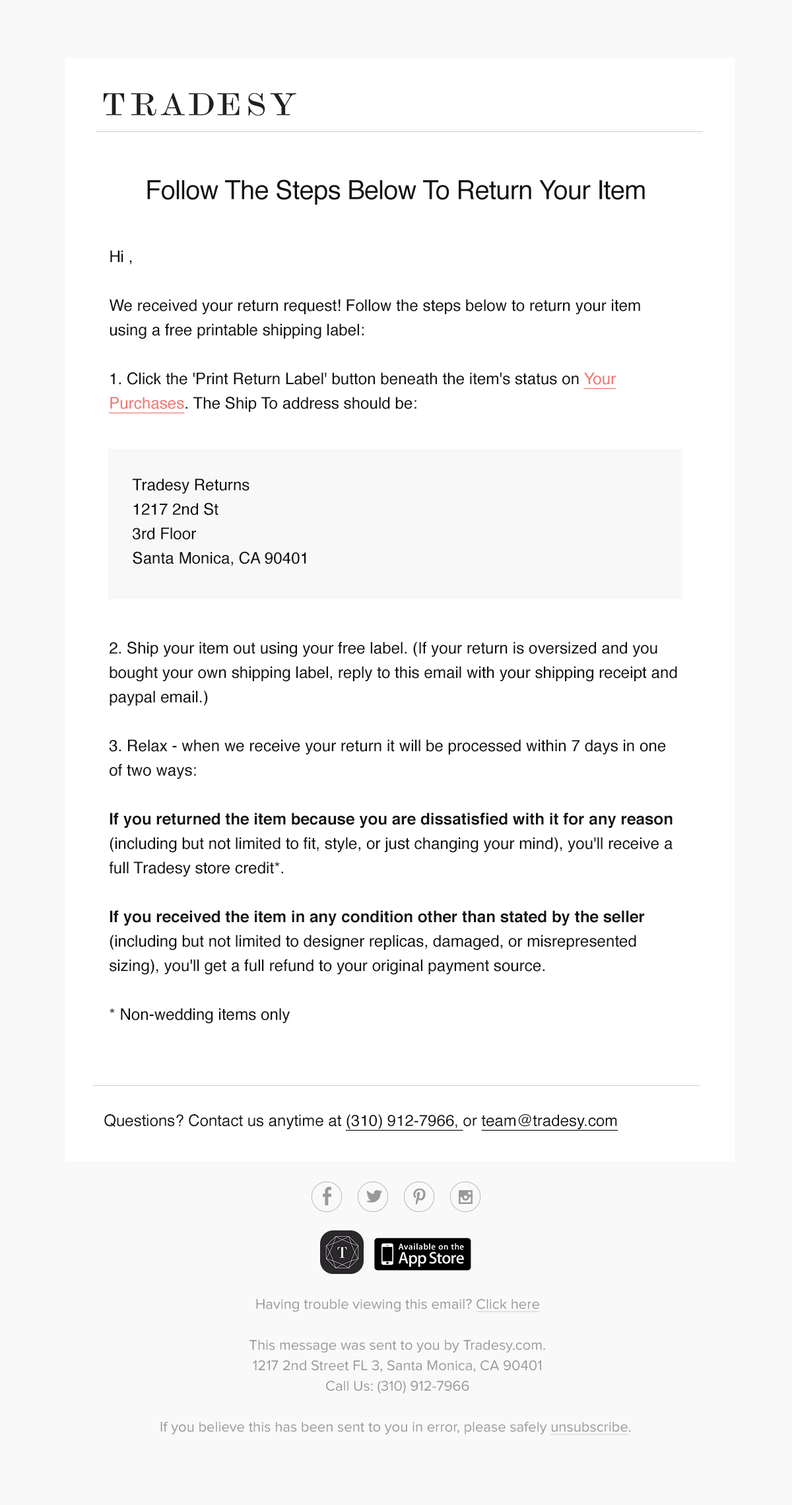
<style>
.page{position:relative;width:792px;height:1505px;background:#ffffff}
.page>*{position:absolute;margin:0}
.t1{font:26.4px "Helvetica";letter-spacing:-0.02em;color:#111111}
.t2{font:16px/24.4px "Helvetica";color:#111111}
.t3{font:16px/24.4px "Helvetica";color:#ee7873;text-decoration:underline}
.t4{font:16px/24.4px "Helvetica-Bold";color:#111111}
.t5{font:15.8px "Helvetica";color:#111111}
.t6{font:15.8px "Helvetica";color:#111111;text-decoration:underline}
.t7{font:14.5px/20.5px "ProximaNova-Regular";color:#999999}
.t8{font:14.5px/20.5px "ProximaNova-Regular";color:#999999;text-decoration:underline}
</style>
<div class="page">
<p class="t1" style="left:147px;top:180px;width:498px;height:25px">Follow The Steps Below To Return Your Item</p>
<p class="t2" style="left:109px;top:250px;width:531px;height:164px">Hi ,<br><br>We received your return request! Follow the steps below to return your item using a free printable shipping label:<br><br>1. Click the 'Print Return Label' button beneath the item's status on <span class="t3">Your Purchases</span>. The Ship To address should be:</p>
<p class="t2" style="left:132px;top:479px;width:174px;height:87px">Tradesy Returns <br>1217 2nd St<br>3rd Floor<br>Santa Monica, CA 90401</p>
<p class="t2" style="left:109px;top:642px;width:568px;height:382px">2. Ship your item out using your free label. (If your return is oversized and you bought your own shipping label, reply to this email with your shipping receipt and paypal email.)<br><br>3. Relax - when we receive your return it will be processed within 7 days in one of two ways:<br><span class="t4"><br>If you returned the item because you are dissatisfied with it for any reason </span>(including but not limited to fit, style, or just changing your mind), you'll receive a full Tradesy store credit*.<br><br><span class="t4">If you received the item in any condition other than stated by the seller</span> (including but not limited to designer replicas, damaged, or misrepresented sizing), you'll get a full refund to your original payment source.<br><br>* Non-wedding items only</p>
<p class="t5" style="left:104px;top:1114px;width:515px;height:17px">Questions? Contact us anytime at <span class="t6">(310) 912-7966, </span>or <span class="t6">team@tradesy.com</span></p>
<p class="t7" style="left:160px;top:1299px;width:471px;height:136px;text-align:center">Having trouble viewing this email? <span class="t8">Click here<br></span><br>This message was sent to you by Tradesy.com.<br>1217 2nd Street FL 3, Santa Monica, CA 90401<br>Call Us: (310) 912-7966<br><br>If you believe this has been sent to you in error, please safely <span class="t8">unsubscribe</span>.</p>
</div>
